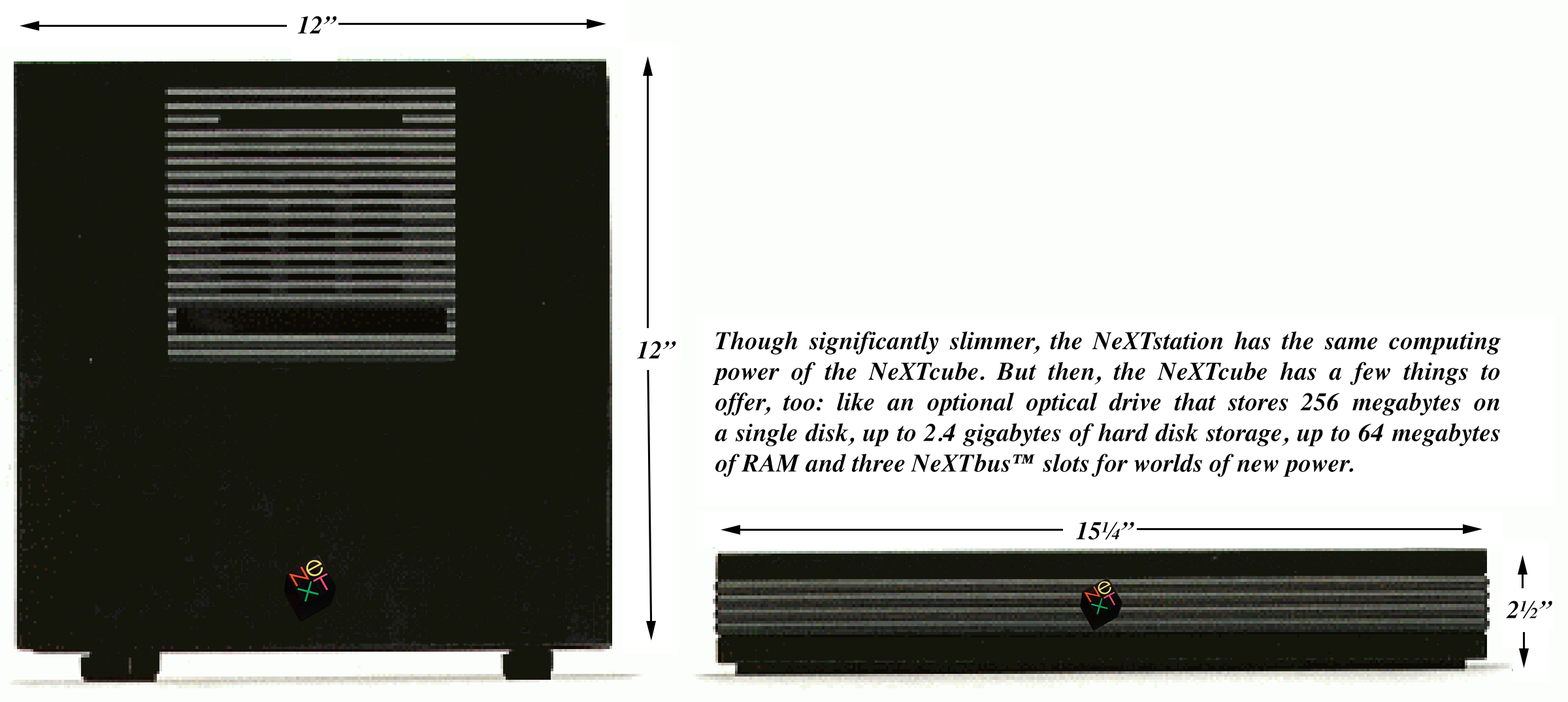
<style>
.page{position:relative;width:1568px;height:702px;background:#fcfefc}
.page>*{position:absolute;margin:0}
.t1{font:25.5px "Times-BoldItalic";color:#000000}
</style>
<div class="page">
<p class="t1" style="left:297px;top:16px;width:39px;height:18px">12”</p>
<p class="t1" style="left:637px;top:341px;width:39px;height:18px">12”</p>
<p class="t1" style="left:713px;top:331px;width:788px;height:146px;text-align:justify">Though significantly slimmer, the NeXTstation has the same computing power of the NeXTcube. But then, the NeXTcube has a few things to<br>offer, too: like an optional optical drive that stores 256 megabytes on<br>a single disk, up to 2.4 gigabytes of hard disk storage, up to 64 megabytes <br>of RAM and three NeXTbus™ slots for worlds of new power.</p>
<p class="t1" style="left:1076px;top:521px;width:58px;height:19px">15¼”</p>
<p class="t1" style="left:1506px;top:600px;width:46px;height:19px">2½”</p>
</div>
